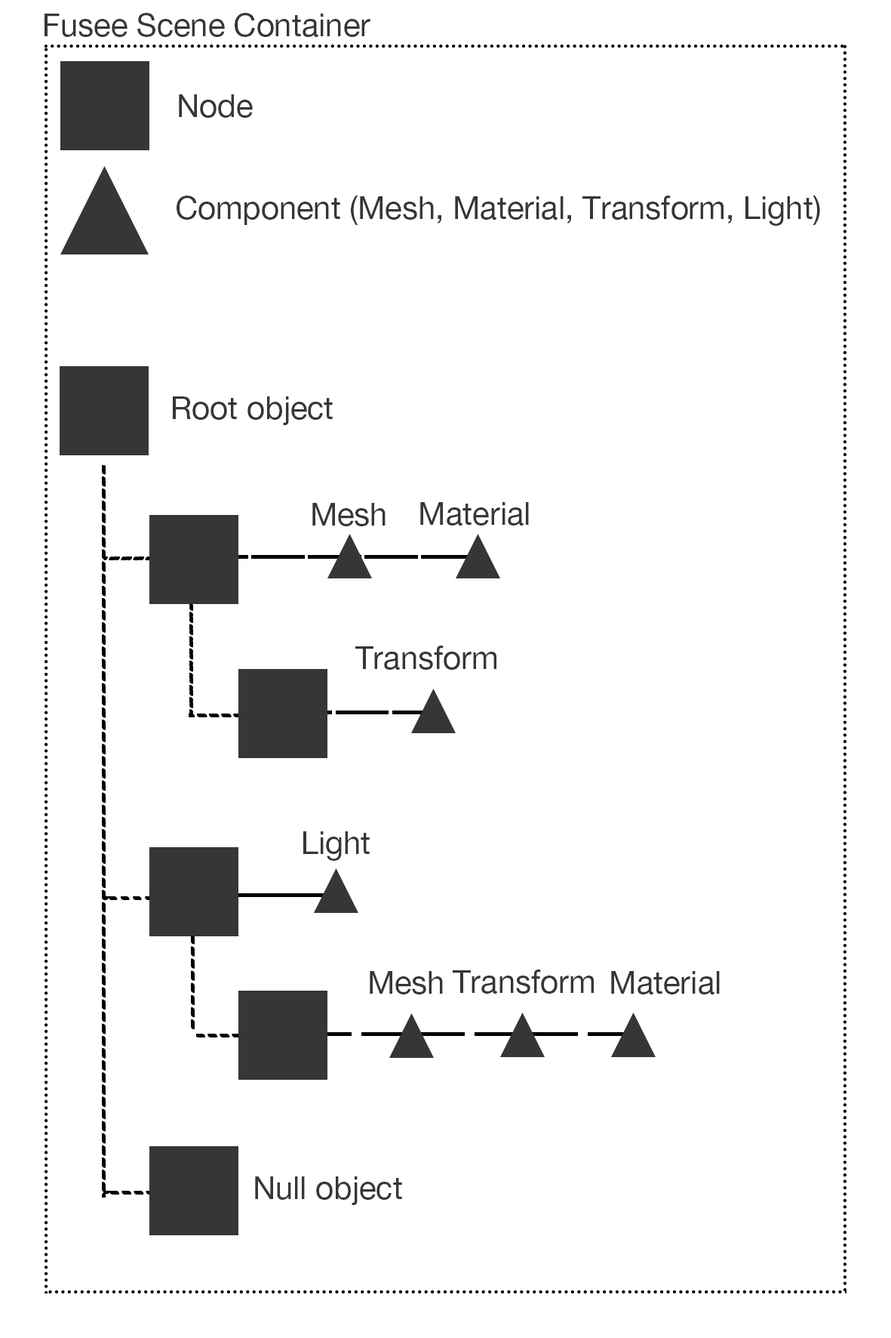
<style>
.page{position:relative;width:891px;height:1338px;background:#ffffff}
.page>*{position:absolute;margin:0}
.t1{font:31.5px "HelveticaNeueLTPro-Roman";color:#363636}
</style>
<div class="page">
<p class="t1" style="left:45px;top:13px;width:326px;height:24px">Fusee Scene Container</p>
<p class="t1" style="left:179px;top:94px;width:74px;height:24px">Node</p>
<p class="t1" style="left:177px;top:196px;width:644px;height:30px">Component (Mesh, Material, Transform, Light)</p>
<p class="t1" style="left:173px;top:396px;width:160px;height:29px">Root object</p>
<p class="t1" style="left:313px;top:503px;width:73px;height:23px">Mesh</p>
<p class="t1" style="left:420px;top:502px;width:109px;height:23px">Material</p>
<p class="t1" style="left:356px;top:645px;width:141px;height:25px">Transform</p>
<p class="t1" style="left:303px;top:831px;width:67px;height:30px">Light</p>
<p class="t1" style="left:370px;top:971px;width:73px;height:23px">Mesh</p>
<p class="t1" style="left:453px;top:969px;width:141px;height:24px">Transform</p>
<p class="t1" style="left:611px;top:971px;width:109px;height:23px">Material</p>
<p class="t1" style="left:255px;top:1176px;width:147px;height:29px">Null object</p>
</div>
